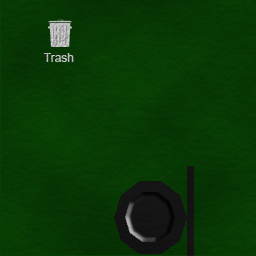
<style>
.page{position:relative;width:256px;height:256px}
.page>*{position:absolute;margin:0}
.t1{font:12px "ArialMT";color:#bdbdbd}
</style>
<div class="page">
<p class="t1" style="left:43px;top:53px;width:31px;height:9px">Trash</p>
</div>
